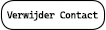
<style>
.page{position:relative;width:106px;height:30px;background:#ffffff}
.page>*{position:absolute;margin:0}
.t1{font:10px "CascadiaCode";letter-spacing:-0.05em;color:#000000}
</style>
<div class="page">
<p class="t1" style="left:7px;top:10px;width:91px;height:11px">Verwijder Contact</p>
</div>
